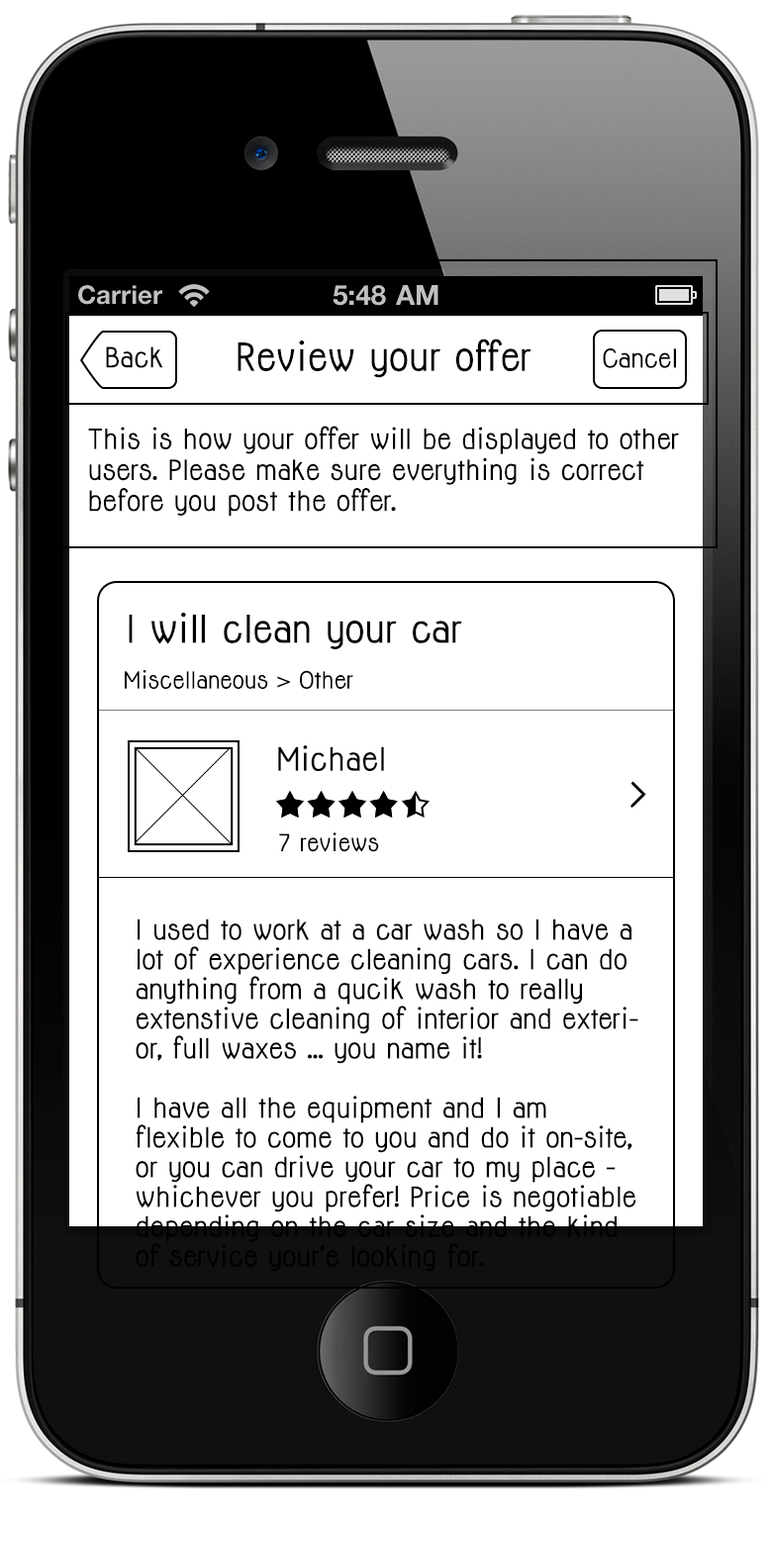
<style>
.page{position:relative;width:772px;height:1545px;background:#ffffff}
.page>*{position:absolute;margin:0}
.t1{font:35.6px "Jolly-Bold";color:#000000}
.t2{font:25.7px "Jolly-Bold";color:#000000}
.t3{font:23.8px "Jolly-Bold";color:#000000}
.t4{font:35.4px "Jolly-Bold";color:#000000}
.t5{font:21.8px "Jolly-Bold";color:#000000}
.t6{font:29.7px "Jolly-Bold";color:#000000}
.t7{font:25.7px/29.7px "Jolly-Bold";color:#000000}
</style>
<div class="page">
<p class="t1" style="left:238px;top:338px;width:293px;height:40px">Review your offer</p>
<p class="t2" style="left:106px;top:346px;width:57px;height:22px">Back</p>
<p class="t3" style="left:603px;top:348px;width:73px;height:20px">Cancel</p>
<p class="t2" style="left:88px;top:426px;width:591px;height:91px">This is how your offer will be displayed to other users. Please make sure everything is correct before you post the offer.</p>
<p class="t4" style="left:129px;top:613px;width:333px;height:36px">I will clean your car</p>
<p class="t5" style="left:125px;top:670px;width:228px;height:19px">Miscellaneous &gt; Other</p>
<p class="t6" style="left:278px;top:745px;width:106px;height:26px">Michael</p>
<p class="t5" style="left:279px;top:832px;width:100px;height:20px">7 reviews</p>
<p class="t7" style="left:136px;top:918px;width:502px;height:354px">I used to work at a car wash so I have a lot of experience cleaning cars. I can do anything from a qucik wash to really  extenstive cleaning of interior and exterior, full waxes ... you name it! <br><br>I have all the equipment and I am       flexible to come to you and do it on-site, or you can drive your car to my place - whichever you prefer! Price is negotiable depending on the car size and the kind of service your’e looking for.</p>
</div>
